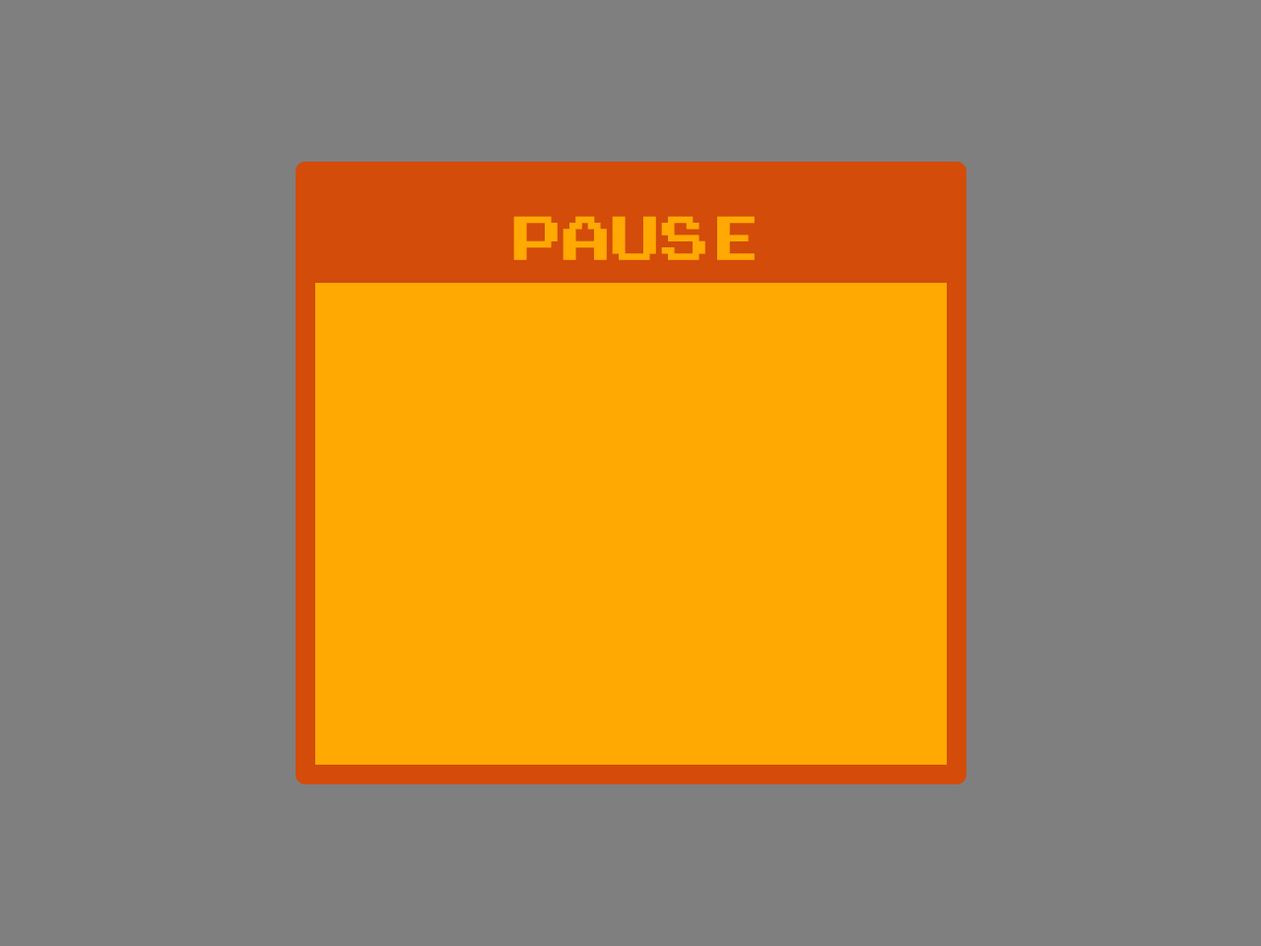
<style>
.page{position:relative;width:1261px;height:946px;background:#7f7f7f}
.page>*{position:absolute;margin:0}
.t1{font:49.3px "PressStartReg";color:#ffa902}
</style>
<div class="page">
<p class="t1" style="left:513px;top:216px;width:242px;height:44px">PAUSE</p>
</div>
